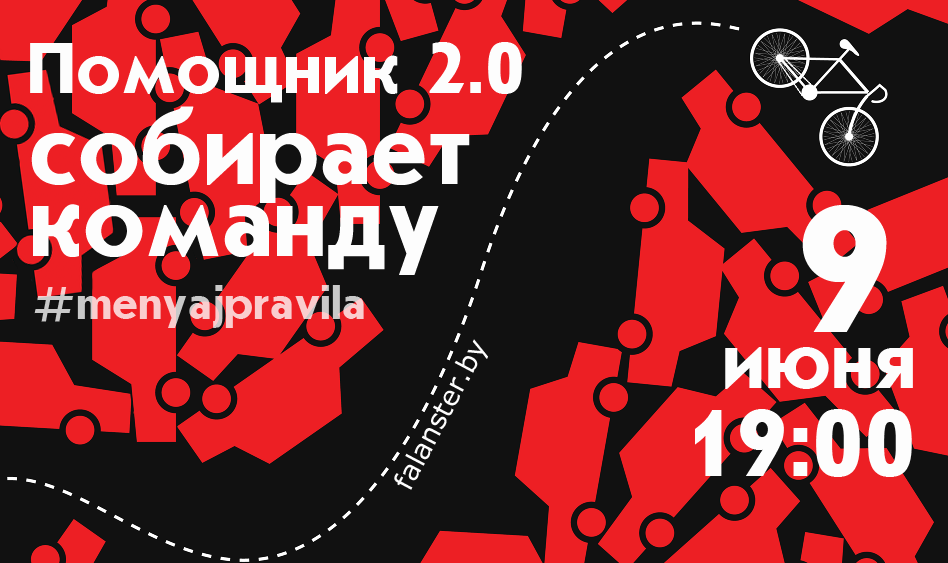
<style>
.page{position:relative;width:948px;height:563px;background:#111111}
.page>*{position:absolute;margin:0}
.t1{font:75.6px "UkrainianJournalSansBold";color:#fefefe}
.t2{font:104.2px/72.1px "UkrainianJournalSansBold";color:#fefefe}
.t3{font:187.4px "UkrainianJournalSansBold";color:#fefefe}
.t4{font:27.8px "Verdana";color:#fefefe}
.t5{font:82.6px "UkrainianJournalSansBold";color:#fefefe}
.t6{font:98.4px "UkrainianJournalSansBold";color:#fefefe}
</style>
<div class="page">
<p class="t1" style="left:30px;top:42px;width:492px;height:61px">Помощник 2.0</p>
<p class="t2" style="left:31px;top:106px;width:439px;height:169px">собирает<br>команду</p>
<p class="t3" style="left:802px;top:205px;width:85px;height:127px">9</p>
<p class="t4" style="left:394px;top:339px;width:94px;height:151px;rotate:-62deg">falanster.by</p>
<p class="t5" style="left:725px;top:347px;width:188px;height:42px">июня</p>
<p class="t6" style="left:695px;top:409px;width:217px;height:68px">19:00</p>
</div>
